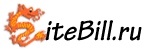
<style>
.page{position:relative;width:149px;height:53px;background:#ffffff}
.page>*{position:absolute;margin:0}
.t1{font:30px "TektonPro-BoldObl";color:#000000}
</style>
<div class="page">
<p class="t1" style="left:45px;top:20px;width:97px;height:21px">iteBill.ru</p>
</div>
